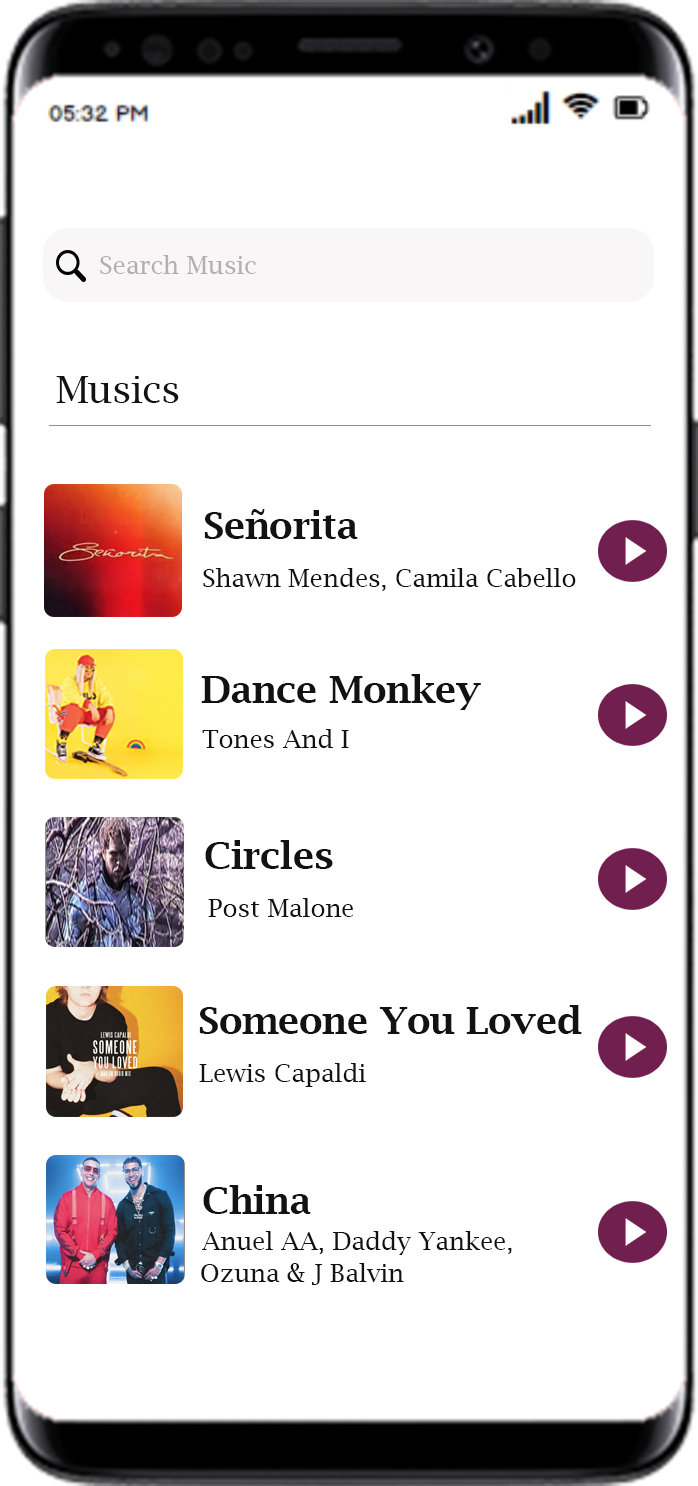
<style>
.page{position:relative;width:698px;height:1486px;background:#ffffff}
.page>*{position:absolute;margin:0}
.t1{font:25px "LucidaBright";color:#b4aeae}
.t2{font:37.5px "LucidaBright";color:#121212}
.t3{font:37.5px "LucidaBright-Demi";color:#121212}
.t4{font:25px "LucidaBright";color:#121212}
</style>
<div class="page">
<p class="t1" style="left:100px;top:255px;width:156px;height:19px">Search Music</p>
<p class="t2" style="left:56px;top:376px;width:123px;height:27px">Musics</p>
<p class="t3" style="left:204px;top:509px;width:154px;height:30px">Señorita</p>
<p class="t4" style="left:203px;top:568px;width:373px;height:23px">Shawn Mendes, Camila Cabello</p>
<p class="t3" style="left:201px;top:674px;width:280px;height:36px">Dance Monkey</p>
<p class="t4" style="left:202px;top:729px;width:147px;height:19px">Tones And I</p>
<p class="t3" style="left:205px;top:840px;width:128px;height:29px">Circles</p>
<p class="t4" style="left:208px;top:898px;width:145px;height:19px">Post Malone</p>
<p class="t3" style="left:199px;top:1005px;width:383px;height:29px">Someone You Loved</p>
<p class="t4" style="left:199px;top:1063px;width:167px;height:24px">Lewis Capaldi</p>
<p class="t3" style="left:203px;top:1185px;width:108px;height:29px">China</p>
<p class="t4" style="left:202px;top:1231px;width:310px;height:24px">Anuel AA, Daddy Yankee,</p>
<p class="t4" style="left:201px;top:1263px;width:203px;height:22px">Ozuna &amp; J Balvin</p>
</div>
